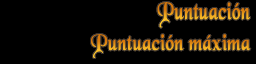
<style>
.page{position:relative;width:256px;height:64px;background:#000000}
.page>*{position:absolute;margin:0}
.t1{font:25.5px "BlackChancery";font-weight:bold;scale:0.75 1}
.t2{font:24px "BlackChancery";font-weight:bold;scale:0.8 1}
</style>
<div class="page">
<p class="t1" style="left:157px;top:2px;width:93px;height:26px">Puntuación</p>
<p class="t2" style="left:91px;top:34px;width:160px;height:24px">Puntuación máxima</p>
</div>
